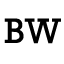
<style>
.page{position:relative;width:64px;height:64px;background:#ffffff}
.page>*{position:absolute;margin:0}
.t1{font:36px "Rockwell";color:#000000}
</style>
<div class="page">
<p class="t1" style="left:4px;top:18px;width:57px;height:26px">BW</p>
</div>
